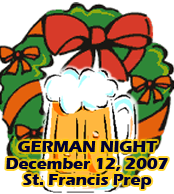
<style>
.page{position:relative;width:174px;height:194px;background:#ffffff}
.page>*{position:absolute;margin:0}
.t1{font:16.7px/16.7px "ErasITC-Bold";color:#000033}
</style>
<div class="page">
<p class="t1" style="left:6px;top:141px;width:162px;height:48px;text-align:center">GERMAN NIGHT<br>December 12, 2007<br>St. Francis Prep</p>
</div>
